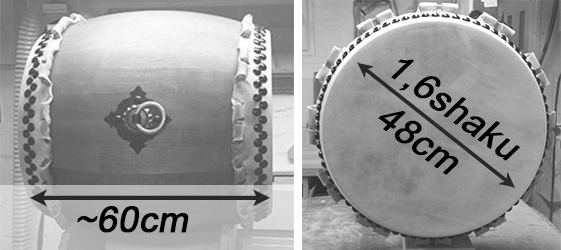
<style>
.page{position:relative;width:561px;height:250px}
.page>*{position:absolute;margin:0}
.t1{font:36px/47px "ArialMT";color:#000000;font-weight:bold;font-style:italic}
.t2{font:36px "ArialMT";color:#000000;font-weight:bold;font-style:italic}
</style>
<div class="page">
<p class="t1" style="left:378px;top:59px;width:142px;height:116px;rotate:36deg">1,6shaku<br>  48cm</p>
<p class="t2" style="left:77px;top:206px;width:112px;height:27px">~60cm</p>
</div>
